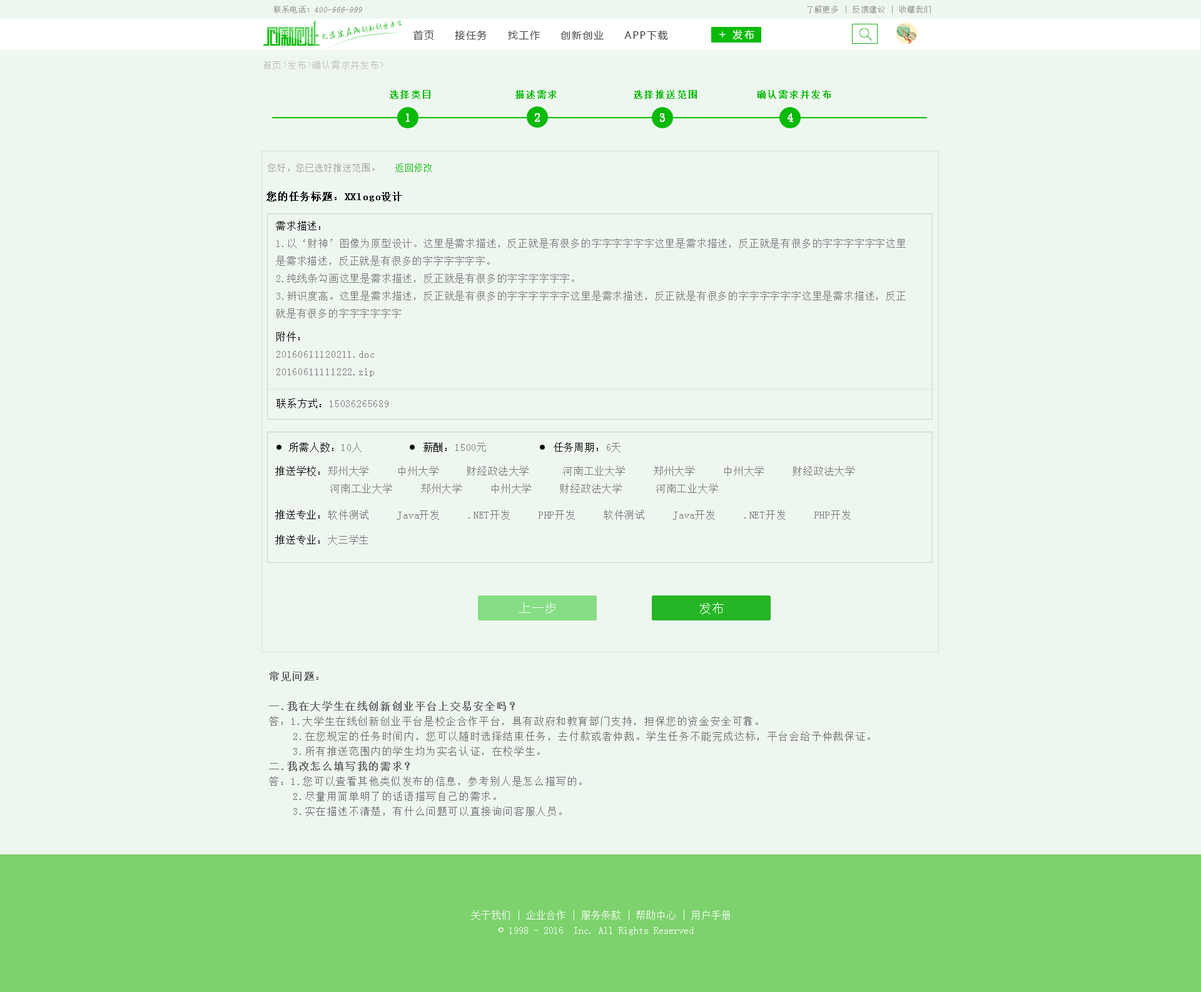
<style>
.page{position:relative;width:1201px;height:992px;background:#eef6f0}
.page>*{position:absolute;margin:0}
.t1{font:8.3px "SimSun";color:#959595;font-style:italic}
.t2{font:8.3px "SimSun";color:#959595}
.t3{font:7.5px "SimSun";letter-spacing:0.1em;color:#959494}
.t4{font:7.7px "AnJingCheng-Xing-2.0";letter-spacing:-0.01em;color:#09ba08}
.t5{font:8.7px "AnJingCheng-Xing-2.0";letter-spacing:-0.01em;color:#09ba08}
.t6{font:10px "MicrosoftYaHei";letter-spacing:0.2em;color:#ffffff}
.t7{font:10px "MicrosoftYaHei";letter-spacing:0.1em;color:#3e3e3e}
.t8{font:11.7px "MicrosoftYaHei";letter-spacing:0.2em;color:#ffffff}
.t9{font:8.8px "SimSun";letter-spacing:0.1em;color:#bebebe}
.t10{font:9.2px "SimSun";letter-spacing:0.1em;color:#09ba08;font-weight:bold}
.t11{font:9.1px "SimSun";letter-spacing:0.1em;color:#09ba08;font-weight:bold}
.t12{font:11.6px "SimSun";letter-spacing:0.1em;color:#ffffff;font-weight:bold}
.t13{font:11.7px "SimSun";letter-spacing:0.1em;color:#ffffff;font-weight:bold}
.t14{font:9.2px "SimSun";color:#a3a0a0}
.t15{font:9.2px "SimSun";color:#09ba08}
.t16{font:10px "SimSun";letter-spacing:0.05em;color:#000000;font-weight:bold}
.t17{font:10px "SimSun";letter-spacing:0.05em;color:#767676}
.t18{font:10px "SimSun";letter-spacing:0.05em;color:#000000}
.t19{font:11.7px "MicrosoftYaHei";letter-spacing:0.1em;color:#ffffff}
.t20{font:10px/15px "SimSun";letter-spacing:0.1em;color:#696969}
.t21{font:10px/15px "SimSun";letter-spacing:0.1em;color:#696969;font-weight:bold}
.t22{font:10px/15px "SimSun";color:#ffffff}
</style>
<div class="page">
<p class="t1" style="left:274px;top:6px;width:88px;height:7px"><span class="t2">联系电话：</span>400-666-999</p>
<p class="t3" style="left:807px;top:6px;width:124px;height:7px">了解更多 | 反馈建议 | 收藏我们</p>
<p class="t4" style="left:322px;top:19px;width:80px;height:20px;rotate:-10deg"><span class="t5">大学生在线</span>创新创业平台</p>
<p class="t6" style="left:733px;top:29px;width:22px;height:10px">发布</p>
<p class="t7" style="left:413px;top:30px;width:255px;height:11px">首页     接任务     找工作     创新创业     APP下载</p>
<p class="t8" style="left:720px;top:31px;width:6px;height:7px">+</p>
<p class="t9" style="left:263px;top:61px;width:121px;height:8px">首页&gt;发布&gt;确认需求并发布&gt;</p>
<p class="t10" style="left:390px;top:90px;width:41px;height:9px">选择类目</p>
<p class="t10" style="left:516px;top:90px;width:41px;height:9px">描述需求</p>
<p class="t11" style="left:634px;top:90px;width:63px;height:9px">选择推送范围</p>
<p class="t11" style="left:757px;top:90px;width:75px;height:9px">确认需求并发布</p>
<p class="t12" style="left:406px;top:113px;width:4px;height:9px">1</p>
<p class="t12" style="left:535px;top:113px;width:5px;height:9px">2</p>
<p class="t12" style="left:660px;top:113px;width:5px;height:9px">3</p>
<p class="t13" style="left:788px;top:113px;width:5px;height:9px">4</p>
<p class="t14" style="left:268px;top:163px;width:164px;height:9px">您好，您已选好推送范围。   <span class="t15">返回修改</span></p>
<p class="t16" style="left:267px;top:191px;width:135px;height:10px">您的任务标题：XXlogo设计</p>
<p class="t17" style="left:276px;top:221px;width:630px;height:98px"><span class="t18">需求描述：<br></span>1.以‘财神’图像为原型设计。这里是需求描述，反正就是有很多的字字字字字字这里是需求描述，反正就是有很多的字字字字字字这里<br>是需求描述，反正就是有很多的字字字字字字。<br>2.纯线条勾画这里是需求描述，反正就是有很多的字字字字字字。<br>3.辨识度高。这里是需求描述，反正就是有很多的字字字字字字这里是需求描述，反正就是有很多的字字字字字字这里是需求描述，反正<br>就是有很多的字字字字字字</p>
<p class="t17" style="left:277px;top:332px;width:97px;height:45px"><span class="t18">附件：<br></span>20160611120211.doc<br>20160611111222.zip</p>
<p class="t17" style="left:277px;top:399px;width:112px;height:10px"><span class="t18">联系方式：</span>15036265689</p>
<p class="t18" style="left:289px;top:442px;width:332px;height:10px">所需人数：<span class="t17">10人           </span>薪酬：<span class="t17">1500元            </span>任务周期：<span class="t17">6天</span></p>
<p class="t17" style="left:275px;top:466px;width:580px;height:28px"><span class="t18">推送学校：</span>郑州大学     中州大学     财经政法大学      河南工业大学     郑州大学     中州大学     财经政法大学<br>          河南工业大学     郑州大学     中州大学     财经政法大学      河南工业大学</p>
<p class="t17" style="left:275px;top:510px;width:576px;height:10px"><span class="t18">推送专业：</span>软件测试     Java开发     .NET开发     PHP开发     软件测试     Java开发     .NET开发     PHP开发</p>
<p class="t18" style="left:275px;top:535px;width:94px;height:10px">推送专业：<span class="t17">大三学生</span></p>
<p class="t19" style="left:519px;top:603px;width:37px;height:11px">上一步</p>
<p class="t19" style="left:700px;top:603px;width:24px;height:12px">发布</p>
<p class="t20" style="left:269px;top:671px;width:601px;height:146px"><span class="t21">常见问题：<br><br>一.我在大学生在线创新创业平台上交易安全吗？<br></span>答：1.大学生在线创新创业平台是校企合作平台，具有政府和教育部门支持，担保您的资金安全可靠。<br>    2.在您规定的任务时间内，您可以随时选择结束任务，去付款或者仲裁。学生任务不能完成达标，平台会给予仲裁保证。<br>    3.所有推送范围内的学生均为实名认证，在校学生。<br><span class="t21">二.我改怎么填写我的需求？<br></span>答：1.您可以查看其他类似发布的信息，参考别人是怎么描写的。<br>    2.尽量用简单明了的话语描写自己的需求。<br>    3.实在描述不清楚，有什么问题可以直接询问客服人员。</p>
<p class="t22" style="left:471px;top:910px;width:260px;height:26px;text-align:center">关于我们 | 企业合作 | 服务条款 | 帮助中心 | 用户手册<br>© 1998 - 2016  Inc. All Rights Reserved</p>
</div>
